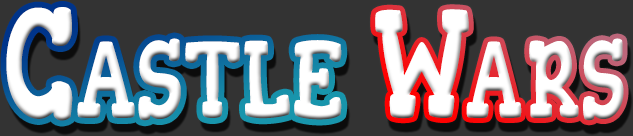
<style>
.page{position:relative;width:633px;height:136px;background:#333333}
.page>*{position:absolute;margin:0}
.t1{font:155.8px "Gorditas-Regular";letter-spacing:0.01em;color:#ffffff;font-variant:small-caps;scale:0.71 1}
.t2{font:155.8px "Gorditas-Regular";letter-spacing:0.01em;color:#ffffff;font-variant:small-caps;scale:0.67 1}
.t3{font:155.8px "Gorditas-Regular";letter-spacing:-0.13em;color:#ffffff;font-variant:small-caps;scale:0.67 1}
.t4{font:155.8px "Gorditas-Regular";letter-spacing:-0.03em;color:#ffffff;font-variant:small-caps;scale:0.67 1}
.t5{font:155.8px "Gorditas-Regular";letter-spacing:0.07em;color:#ffffff;font-variant:small-caps;scale:0.67 1}
</style>
<div class="page">
<p class="t1" style="left:6px;top:7px;width:336px;height:114px">Castle</p>
<p class="t2" style="left:375px;top:9px;width:249px;height:112px"><span class="t3"> </span><span class="t4">W</span><span class="t5">a</span>rs</p>
</div>
